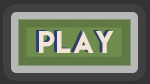
<style>
.page{position:relative;width:150px;height:84px;background:#404040}
.page>*{position:absolute;margin:0}
.t1{font:28px "LemonMilk";letter-spacing:0.05em;color:#f2e5d6}
</style>
<div class="page">
<p class="t1" style="left:39px;top:31px;width:75px;height:22px">Play</p>
</div>
